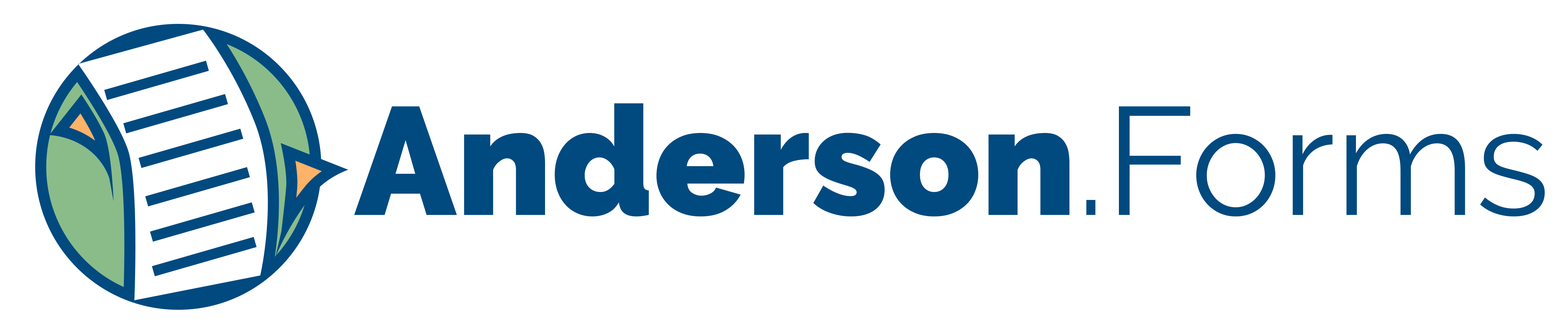
<style>
.page{position:relative;width:1568px;height:332px;background:#ffffff}
.page>*{position:absolute;margin:0}
.t1{font:153.1px "Raleway-Black";color:#004a80}
.t2{font:153.1px "Raleway-Regular";color:#004a80}
</style>
<div class="page">
<p class="t1" style="left:354px;top:103px;width:1191px;height:114px">Anderson<span class="t2">.Forms</span></p>
</div>
